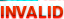
<style>
.page{position:relative;width:64px;height:19px;background:#ffffff}
.page>*{position:absolute;margin:0}
.t1{font:16px "AkzidenzGroteskBQ-Bold"}
</style>
<div class="page">
<p class="t1" style="left:1px;top:3px;width:62px;height:12px">INVALID</p>
</div>
